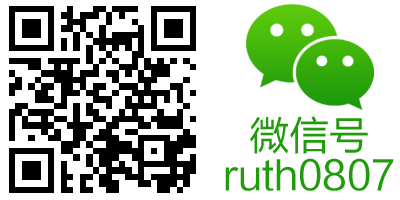
<style>
.page{position:relative;width:400px;height:200px;background:#ffffff}
.page>*{position:absolute;margin:0}
.t1{font:40px/40px "FZLTHK--GBK1-0";color:#209b0b}
.t2{font:40px "FZLTHK--GBK1-0";color:#ff3b30}
</style>
<div class="page">
<p class="t1" style="left:225px;top:116px;width:169px;height:75px"><span class="t2"><br></span>微信号<br>ruth0807</p>
</div>
